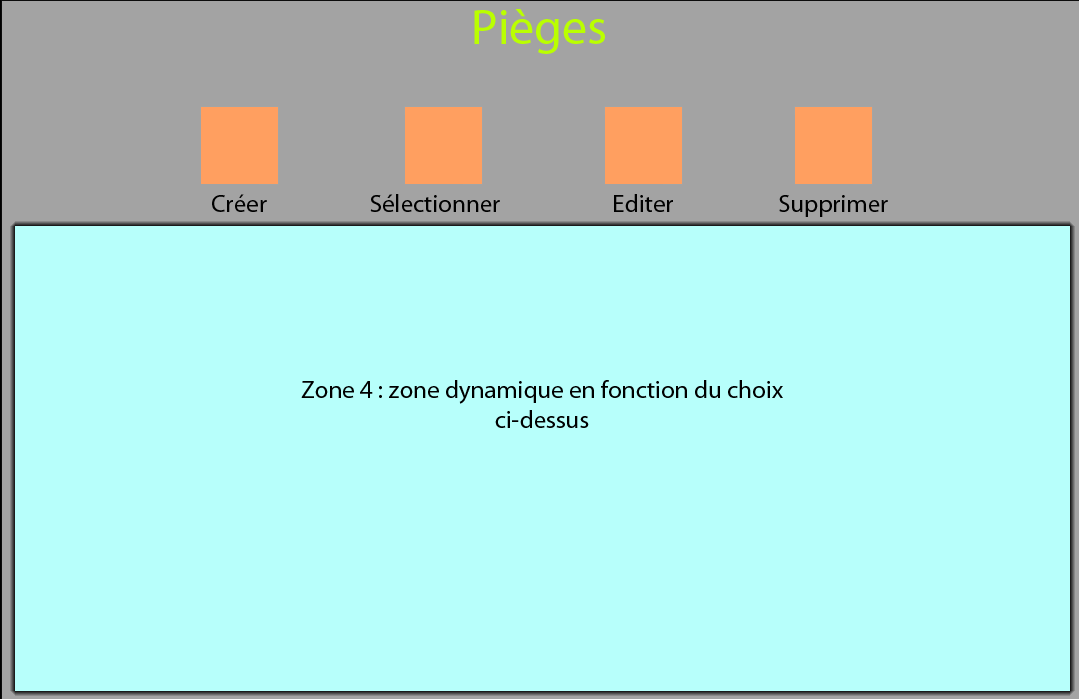
<style>
.page{position:relative;width:1079px;height:699px;background:#b7fffb}
.page>*{position:absolute;margin:0}
.t1{font:50px "MyriadPro-Regular";color:#baff00}
.t2{font:25px "MyriadPro-Regular";color:#000000}
</style>
<div class="page">
<p class="t1" style="left:474px;top:9px;width:131px;height:45px">Pièges</p>
<p class="t2" style="left:212px;top:194px;width:55px;height:18px">Créer</p>
<p class="t2" style="left:370px;top:194px;width:130px;height:18px">Sélectionner</p>
<p class="t2" style="left:614px;top:194px;width:59px;height:18px">Editer</p>
<p class="t2" style="left:779px;top:195px;width:109px;height:22px">Supprimer</p>
<p class="t2" style="left:301px;top:380px;width:482px;height:48px;text-align:center">Zone 4 : zone dynamique en fonction du choix<br>ci-dessus</p>
</div>
